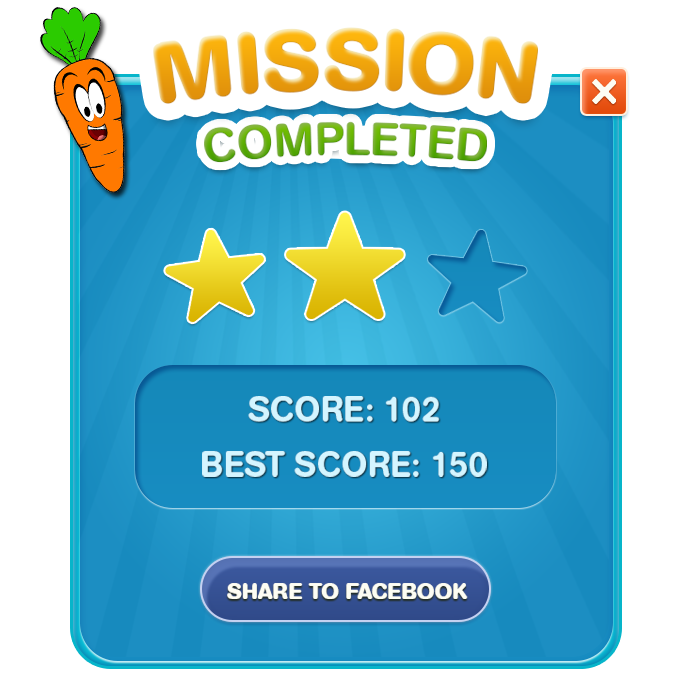
<style>
.page{position:relative;width:700px;height:700px;background:#ffffff}
.page>*{position:absolute;margin:0}
.t1{font:85.5px "AGBookRounded-Bold";color:#f8a900;text-transform:uppercase}
.t2{font:47.5px "AGBookRounded-Medium";text-transform:uppercase}
.t3{font:35.2px/13.3px "AGBookRounded-Medium";color:#d4f5ff;text-transform:uppercase}
.t4{font:35.2px "AGBookRounded-Medium";color:#d4f5ff;text-transform:uppercase}
.t5{font:22.8px "AGBookRounded-Bold";color:#fdfdf3;text-transform:uppercase}
</style>
<div class="page">
<p class="t1" style="left:153px;top:27px;width:385px;height:77px">mission</p>
<p class="t2" style="left:204px;top:121px;width:283px;height:42px">COMPLETED</p>
<p class="t3" style="left:202px;top:396px;width:285px;height:81px;text-align:center"><span class="t4">SCORE: 102<br><br></span>BEST SCORE: 150</p>
<p class="t5" style="left:227px;top:583px;width:241px;height:16px">SHARE TO FACEBOOK</p>
</div>
